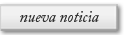
<style>
.page{position:relative;width:125px;height:35px}
.page>*{position:absolute;margin:0}
.t1{font:15.6px "ACaslonPro-Italic";color:#2c2c2c}
</style>
<div class="page">
<p class="t1" style="left:20px;top:11px;width:79px;height:11px">nueva noticia</p>
</div>
